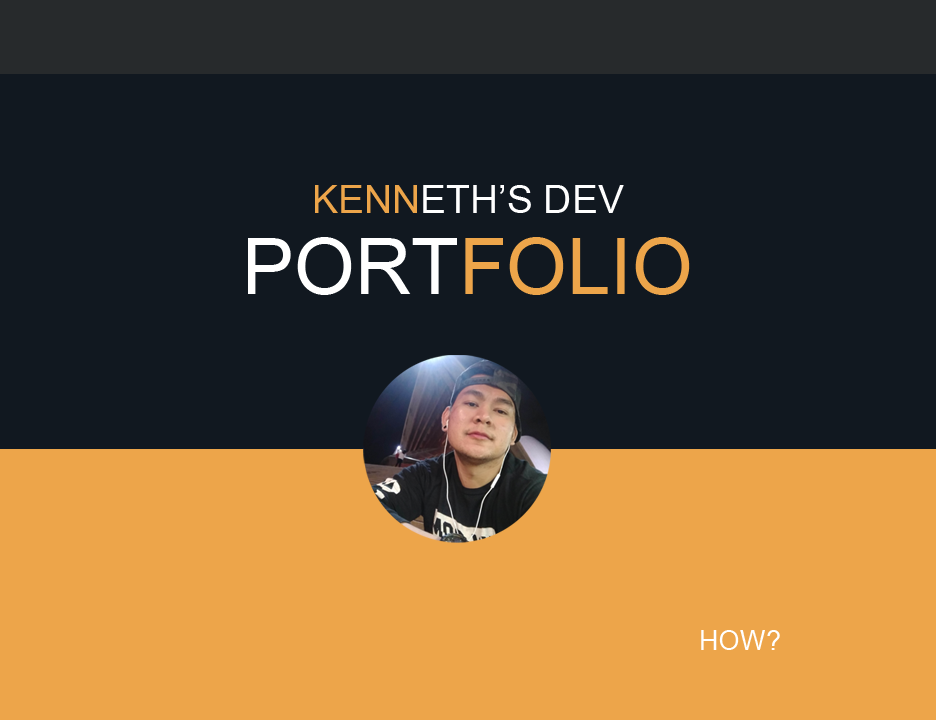
<style>
.page{position:relative;width:936px;height:720px;background:#111820}
.page>*{position:absolute;margin:0}
.t1{font:39px "ArialMT";color:#ffffff}
.t2{font:39px "ArialMT";color:#eda54a}
.t3{font:77.9px "ArialMT";color:#eda54a}
.t4{font:77.9px "ArialMT";color:#ffffff}
.t5{font:27.5px "ArialMT";color:#ffffff}
</style>
<div class="page">
<p class="t1" style="left:315px;top:185px;width:309px;height:28px"><span class="t2">KENN</span>ETH’S DEV</p>
<p class="t3" style="left:248px;top:237px;width:442px;height:58px"><span class="t4">PORT</span>FOLIO</p>
<p class="t5" style="left:701px;top:630px;width:79px;height:20px">HOW?</p>
</div>
